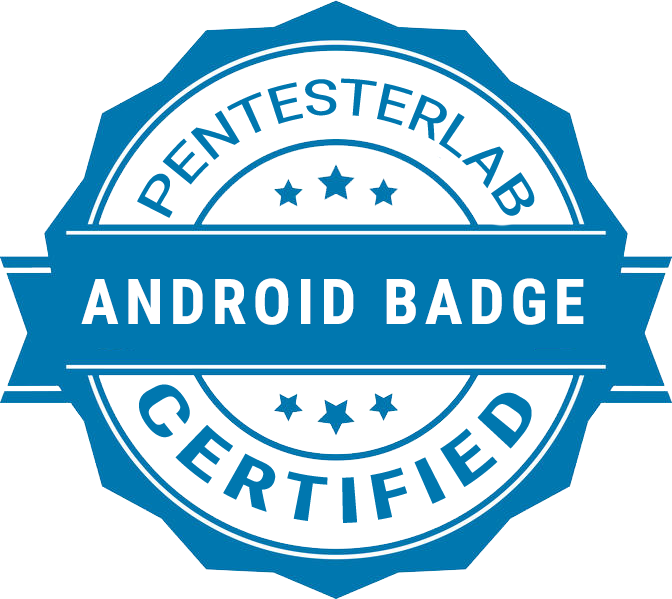
<style>
.page{position:relative;width:672px;height:599px;background:#ffffff}
.page>*{position:absolute;margin:0}
.t1{font:50px/29px "RobotoCondensed-Regular";color:#0077af;text-transform:uppercase}
.t2{font:63px "RobotoCondensed-Bold";letter-spacing:0.1em;color:#ffffff}
.t3{font:63px/29px "RobotoCondensed-Bold";letter-spacing:0.1em;color:#0077af}
</style>
<div class="page">
<p class="t1" style="left:137px;top:78px;width:398px;height:140px">pentesterlab</p>
<p class="t2" style="left:81px;top:278px;width:503px;height:47px">ANDROID BADGE</p>
<p class="t3" style="left:139px;top:384px;width:393px;height:139px">CERTIFIED</p>
</div>
